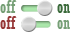
<style>
.page{position:relative;width:70px;height:32px;background:#ffffff}
.page>*{position:absolute;margin:0}
.t1{font:18px "Rockwell-Condensed";color:#769f76}
.t2{font:18px "Rockwell-Condensed";color:#3b6a3b}
.t3{font:18px "Rockwell-Condensed";color:#963737}
</style>
<div class="page">
<p class="t1" style="left:0px;top:0px;width:17px;height:13px">off</p>
<p class="t2" style="left:57px;top:4px;width:13px;height:9px">on</p>
<p class="t3" style="left:0px;top:16px;width:17px;height:13px">off</p>
<p class="t1" style="left:57px;top:20px;width:13px;height:9px">on</p>
</div>
